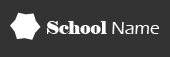
<style>
.page{position:relative;width:170px;height:57px;background:#333333}
.page>*{position:absolute;margin:0}
.t1{font:18px "Elephant-Regular";color:#fefefe}
.t2{font:18px "ErasITC-Medium";color:#fefefe}
</style>
<div class="page">
<p class="t1" style="left:47px;top:21px;width:113px;height:13px">School <span class="t2">Name</span></p>
</div>
